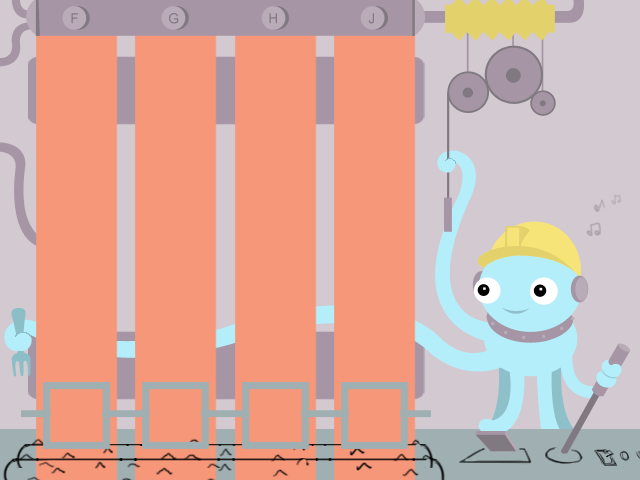
<style>
.page{position:relative;width:640px;height:480px;background:#f79779}
.page>*{position:absolute;margin:0}
.t1{font:14px "ArialMT";letter-spacing:0.01em;color:#817981}
</style>
<div class="page">
<p class="t1" style="left:71px;top:13px;width:7px;height:11px">F</p>
<p class="t1" style="left:169px;top:13px;width:10px;height:11px">G</p>
<p class="t1" style="left:269px;top:13px;width:8px;height:11px">H</p>
<p class="t1" style="left:368px;top:13px;width:6px;height:11px">J</p>
</div>
